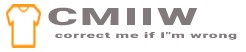
<style>
.page{position:relative;width:246px;height:52px;background:#ffffff}
.page>*{position:absolute;margin:0}
.t1{font:24px "Roboto-Black";letter-spacing:0.05em;color:#827a7a;scale:1.96 1}
.t2{font:8px "Roboto-Black";letter-spacing:0.05em;color:#827a7a;scale:1.96 1}
</style>
<div class="page">
<p class="t1" style="left:48px;top:7px;width:150px;height:19px">CMIIW</p>
<p class="t2" style="left:55px;top:32px;width:182px;height:8px">correct me if I"m wrong</p>
</div>
